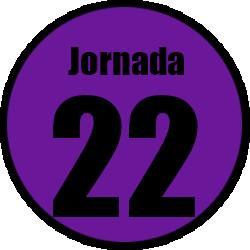
<style>
.page{position:relative;width:250px;height:250px;background:#6a179a}
.page>*{position:absolute;margin:0}
.t1{font:36px "Impact";color:#000000}
.t2{font:152px "Impact";color:#000000}
</style>
<div class="page">
<p class="t1" style="left:68px;top:47px;width:116px;height:28px">Jornada</p>
<p class="t2" style="left:52px;top:95px;width:146px;height:122px">22</p>
</div>
